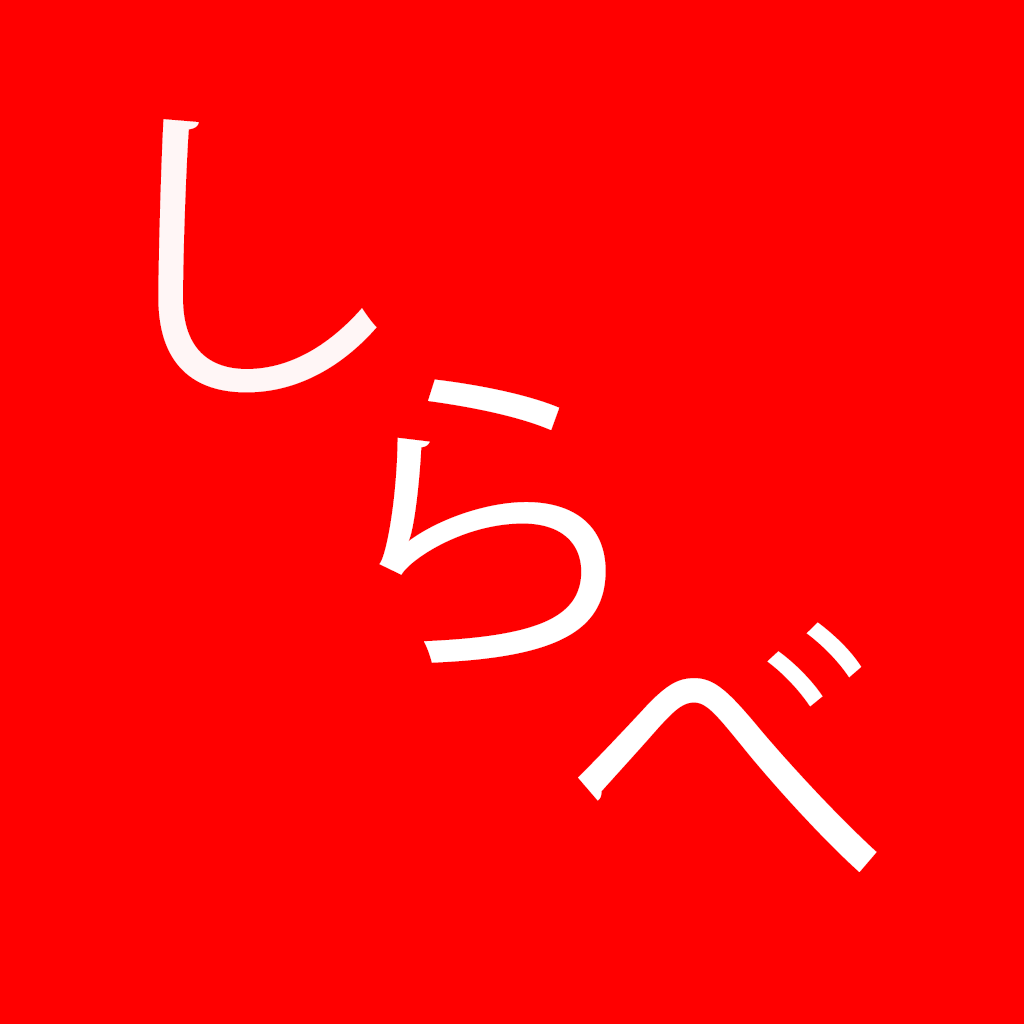
<style>
.page{position:relative;width:1024px;height:1024px;background:#ff0000}
.page>*{position:absolute;margin:0}
.t1{font:320px "KozGoPr6N-Regular";color:#fff6f6}
.t2{font:320px "KozGoPr6N-Regular";color:#ffffff}
</style>
<div class="page">
<p class="t1" style="left:158px;top:119px;width:219px;height:274px">し</p>
<p class="t2" style="left:379px;top:379px;width:227px;height:284px">ら</p>
<p class="t2" style="left:578px;top:622px;width:299px;height:250px">べ</p>
</div>
